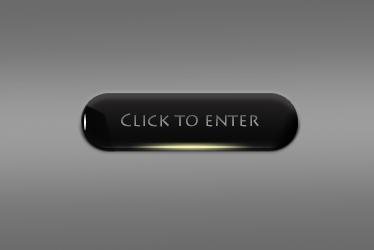
<style>
.page{position:relative;width:374px;height:250px}
.page>*{position:absolute;margin:0}
.t1{font:18px "LithosPro-Regular";color:#858585}
</style>
<div class="page">
<p class="t1" style="left:121px;top:113px;width:138px;height:14px">Click to enter</p>
</div>
